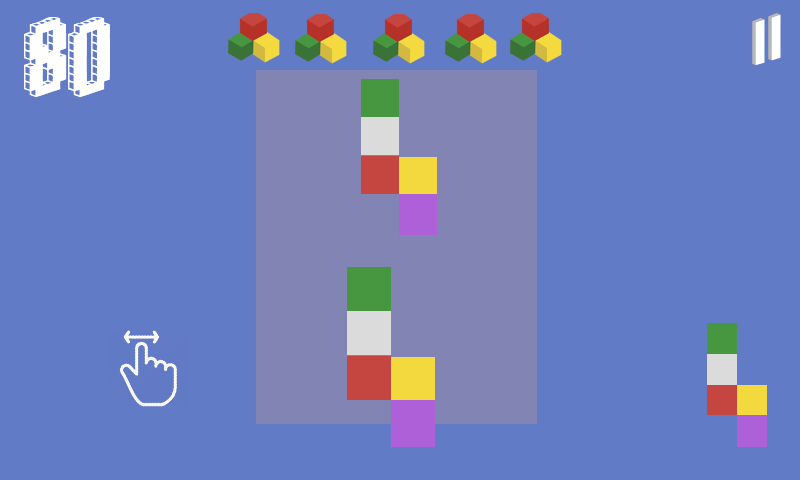
<style>
.page{position:relative;width:800px;height:480px;background:#617bc7}
.page>*{position:absolute;margin:0}
.t1{font:89px "Blox-(BRK";color:#fffffd}
</style>
<div class="page">
<p class="t1" style="left:24px;top:17px;width:86px;height:80px">80</p>
</div>
